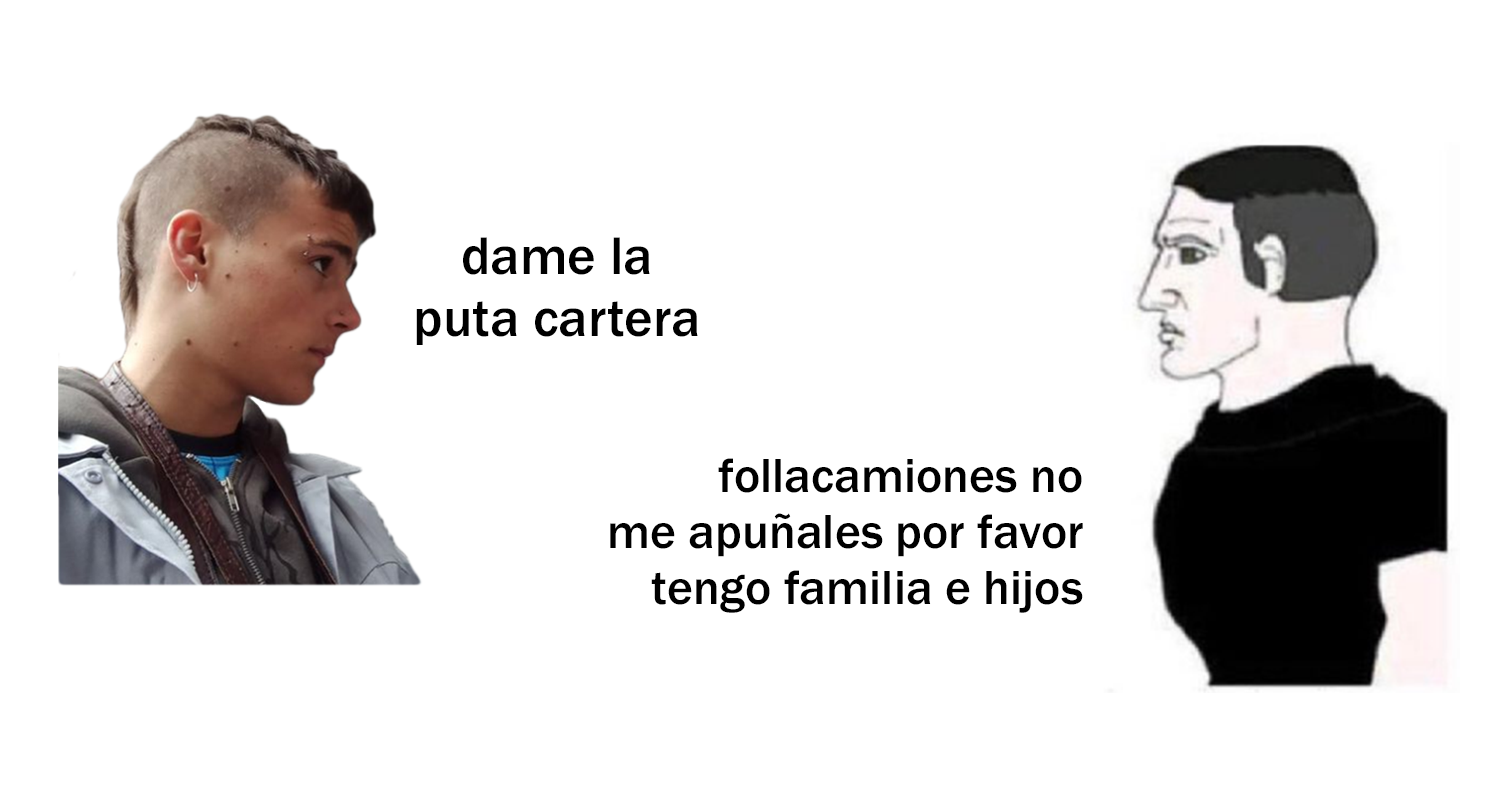
<style>
.page{position:relative;width:1500px;height:787px;background:#ffffff}
.page>*{position:absolute;margin:0}
.t1{font:54.7px "FranklinGothic-Medium";color:#000000}
.t2{font:49.6px "FranklinGothic-Medium";color:#000000}
</style>
<div class="page">
<p class="t1" style="left:416px;top:237px;width:282px;height:108px;text-align:center">dame la<br>puta cartera</p>
<p class="t2" style="left:610px;top:458px;width:473px;height:155px;text-align:right">follacamiones no<br>me apuñales por favor<br>tengo familia e hijos</p>
</div>
